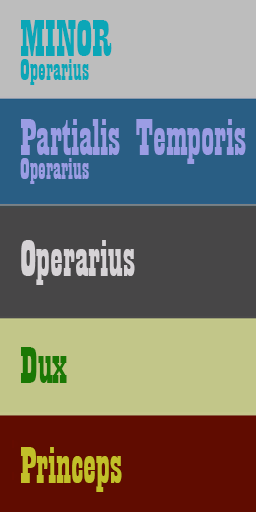
<style>
.page{position:relative;width:256px;height:512px}
.page>*{position:absolute;margin:0}
.t1{font:32.3px/24px "Playbill";color:#0ba6b7}
.t2{font:53.7px/24px "Playbill";color:#0ba6b7}
.t3{font:53.7px/24px "Playbill";color:#9b9de4}
.t4{font:32.3px/24px "Playbill";color:#9b9de4}
.t5{font:53.7px "Playbill";color:#d6d3d6}
.t6{font:53.7px "Playbill";color:#1a7804}
.t7{font:53.7px "Playbill";color:#c2c029}
</style>
<div class="page">
<p class="t1" style="left:20px;top:20px;width:92px;height:65px"><span class="t2">MINOR<br></span>Operarius</p>
<p class="t3" style="left:20px;top:119px;width:226px;height:65px">Partialis Temporis<br><span class="t4">Operarius</span></p>
<p class="t5" style="left:21px;top:240px;width:114px;height:45px">Operarius</p>
<p class="t6" style="left:21px;top:347px;width:46px;height:36px">Dux</p>
<p class="t7" style="left:21px;top:447px;width:101px;height:45px">Princeps</p>
</div>
